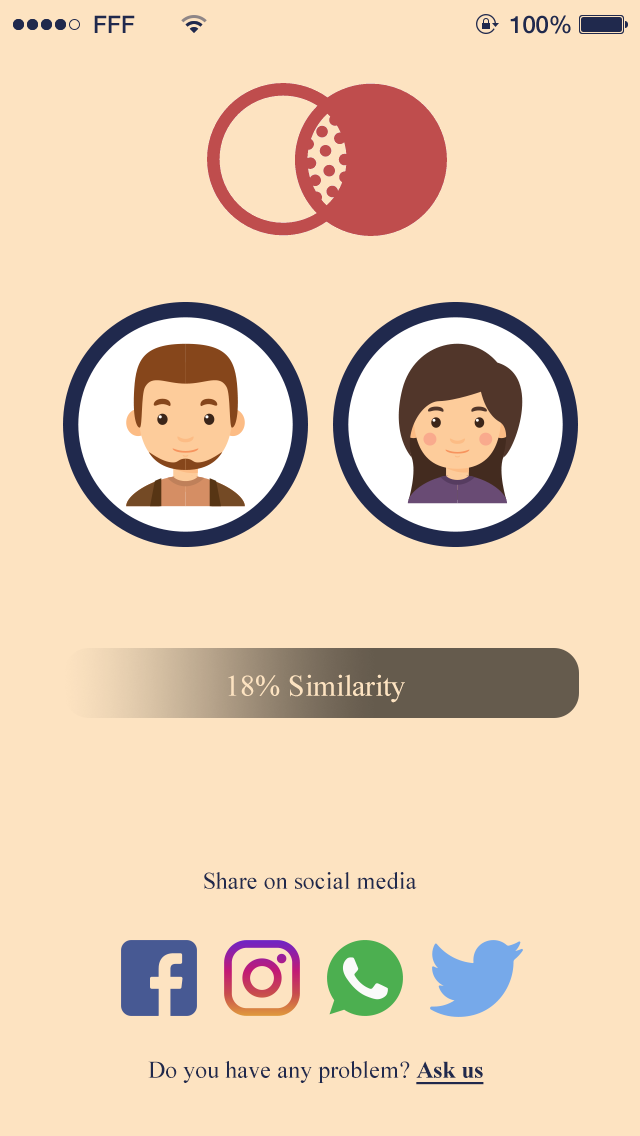
<style>
.page{position:relative;width:640px;height:1136px;background:#fde3c1}
.page>*{position:absolute;margin:0}
.t1{font:24px "HelveticaNeue-Medium";color:#20294d}
.t2{font:30px "TimesNewRomanPSMT";color:#fde3c1}
.t3{font:24px "TimesNewRomanPSMT";color:#20294d}
.t4{font:24px "TimesNewRomanPS-BoldMT";color:#20294d;text-decoration:underline}
</style>
<div class="page">
<p class="t1" style="left:94px;top:15px;width:41px;height:18px">FFF</p>
<p class="t1" style="left:510px;top:15px;width:61px;height:19px">100%</p>
<p class="t2" style="left:228px;top:674px;width:177px;height:29px">18% Similarity</p>
<p class="t3" style="left:204px;top:872px;width:213px;height:17px">Share on social media</p>
<p class="t3" style="left:148px;top:1061px;width:336px;height:24px">Do you have any problem? <span class="t4">Ask us</span></p>
</div>
